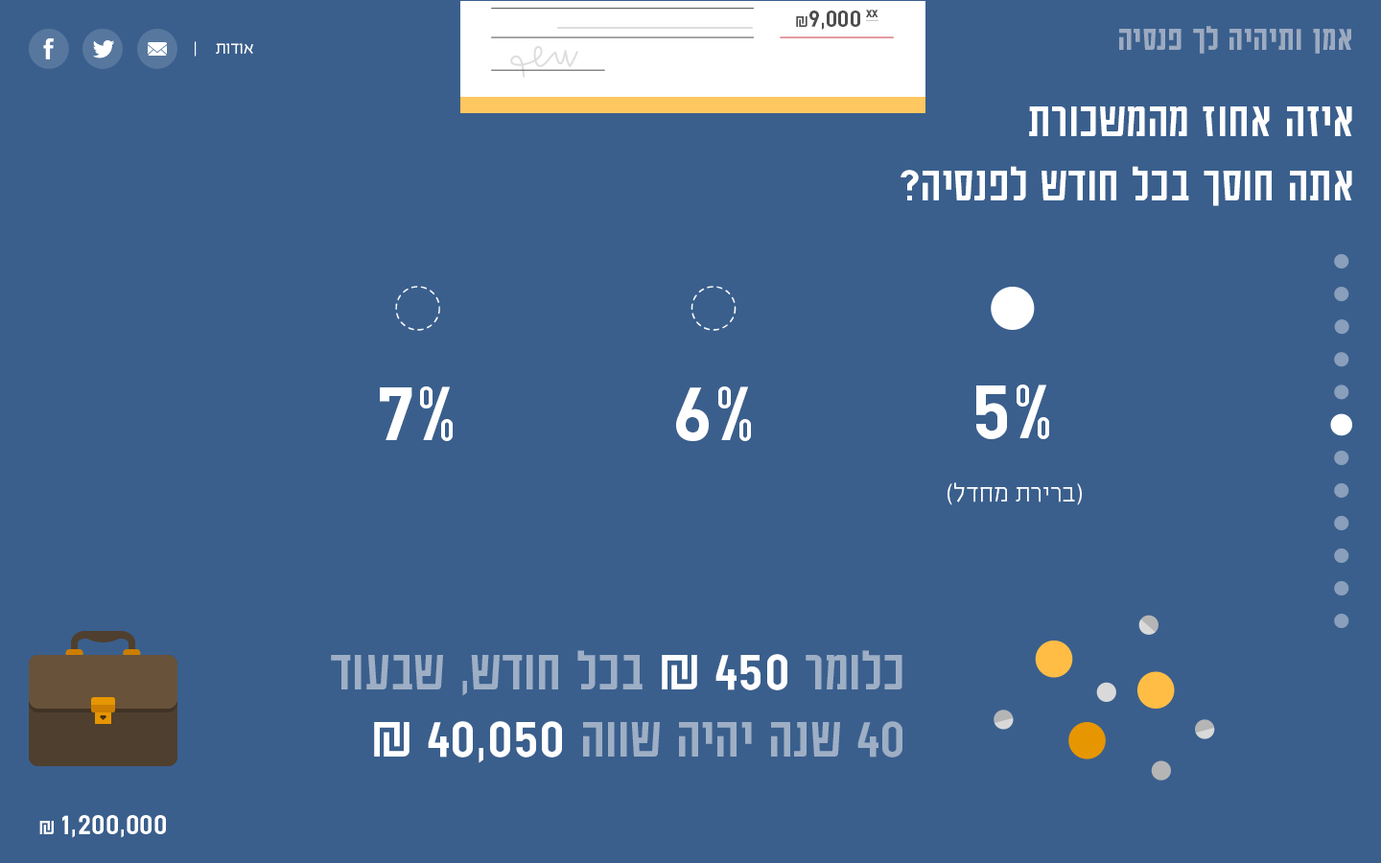
<style>
.page{position:relative;width:1381px;height:863px;background:#3a5f8d}
.page>*{position:absolute;margin:0}
.t1{font:28.7px "AdumaFOT-Regular";color:#4d4d4d}
.t2{font:19.2px "AdumaFOT-Regular";color:#4d4d4d}
.t3{font:28.7px "AdumaFOT-Regular";color:#4d4d4d;text-decoration:underline}
.t4{font:37.8px "AdumaFOT-Medium";color:#9caac0}
.t5{font:19.2px "EzerBlock_OE-Light";color:#ffffff}
.t6{font:53.8px "AdumaFOT-Regular";color:#ffffff}
.t7{font:95.9px "AdumaFOT-Regular";color:#ffffff}
.t8{font:28.8px "EzerBlock_OE-Light";color:#ffffff}
.t9{font:62.3px/67.1px "AdumaFOT-Regular";color:#9eafc5}
.t10{font:62.3px/67.1px "AdumaFOT-Regular";color:#ffffff}
.t11{font:33.6px "AdumaFOT-Regular";color:#ffffff}
.t12{font:24px "AdumaFOT-Regular";color:#ffffff}
</style>
<div class="page">
<p class="t1" style="left:796px;top:10px;width:83px;height:20px"><span class="t2">₪</span>9,000 <span class="t3">xx</span></p>
<p class="t4" style="left:1119px;top:26px;width:233px;height:28px">אמן ותיהיה לך פנסיה</p>
<p class="t5" style="left:195px;top:41px;width:58px;height:16px">אודות     |</p>
<p class="t6" style="left:901px;top:106px;width:451px;height:100px">איזה אחוז מהמשכורת<br>אתה חוסך בכל חודש לפנסיה?</p>
<p class="t7" style="left:380px;top:387px;width:73px;height:54px">7%</p>
<p class="t7" style="left:676px;top:387px;width:75px;height:54px">6%</p>
<p class="t7" style="left:976px;top:385px;width:73px;height:54px">5%</p>
<p class="t8" style="left:948px;top:482px;width:134px;height:24px">(ברירת מחדל)</p>
<p class="t9" style="left:331px;top:650px;width:572px;height:114px">כלומר <span class="t10">450 ₪</span> בכל חודש, שבעוד<br>40 שנה יהיה שווה <span class="t10">40,050 ₪</span></p>
<p class="t11" style="left:39px;top:815px;width:127px;height:23px">1,200,000<span class="t12"> ₪</span></p>
</div>
